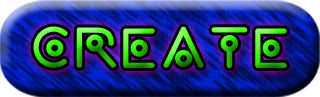
<style>
.page{position:relative;width:320px;height:97px}
.page>*{position:absolute;margin:0}
.t1{font:58.3px "wearealien!!"}
</style>
<div class="page">
<p class="t1" style="left:33px;top:26px;width:254px;height:42px">Create</p>
</div>
